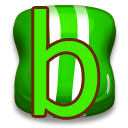
<style>
.page{position:relative;width:128px;height:128px;background:#ffffff}
.page>*{position:absolute;margin:0}
.t1{font:132.9px "SourceHanSansCN-Regular";color:#41ed00}
</style>
<div class="page">
<p class="t1" style="left:34px;top:9px;width:64px;height:108px">b</p>
</div>
